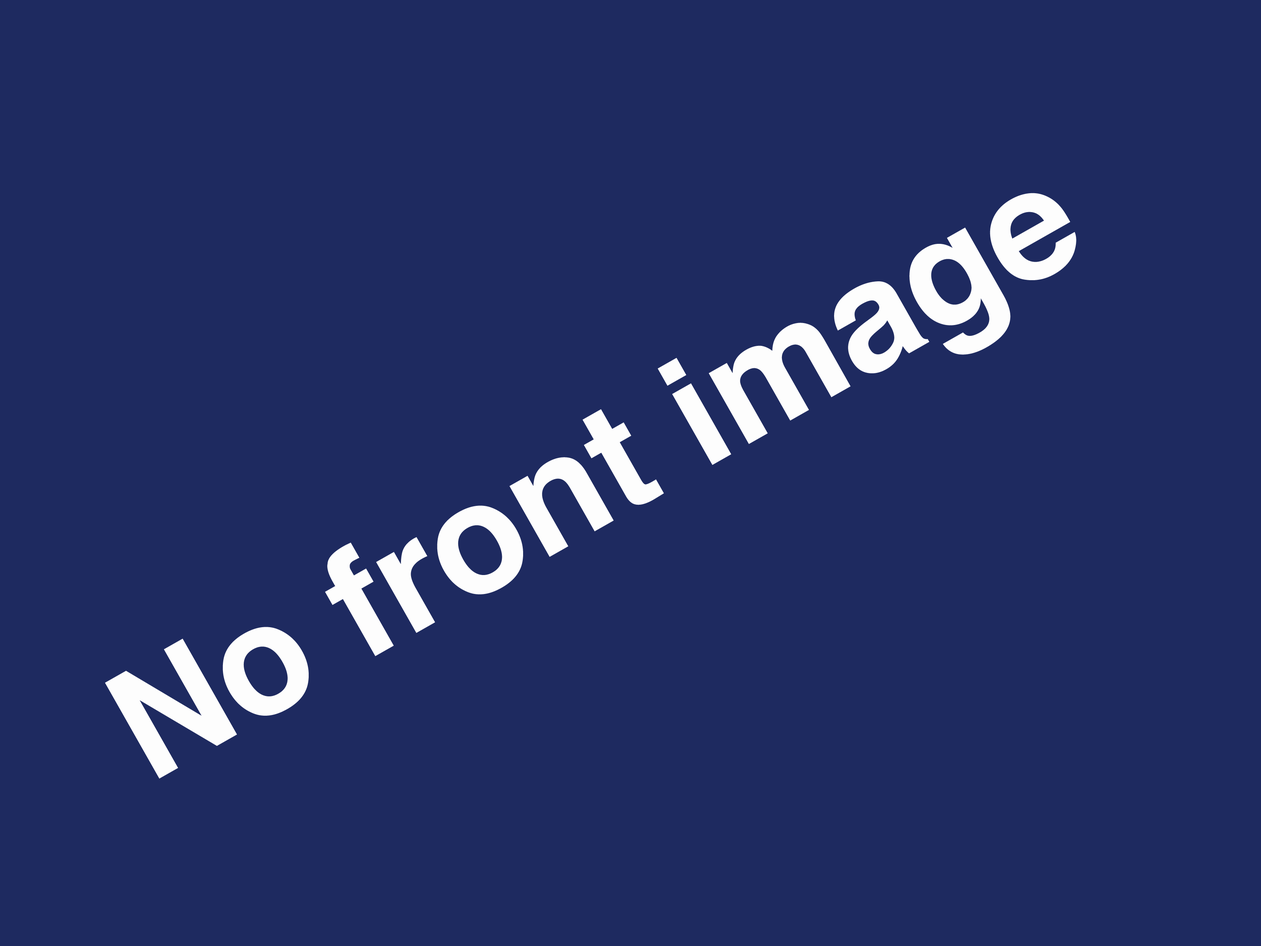
<style>
.page{position:relative;width:1261px;height:946px;background:#1e2a60}
.page>*{position:absolute;margin:0}
.t1{font:152.9px "Helvetica-Bold";color:#fdfdfd}
</style>
<div class="page">
<p class="t1" style="left:105px;top:193px;width:971px;height:585px;rotate:-30deg">No front image</p>
</div>
